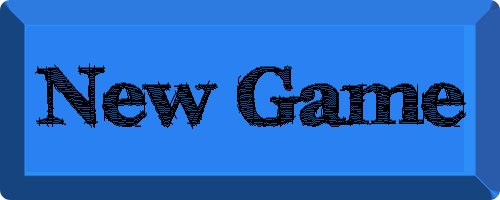
<style>
.page{position:relative;width:500px;height:200px;background:#2a81f1}
.page>*{position:absolute;margin:0}
.t1{font:80px "FFFTusj-Bold";color:#000000}
</style>
<div class="page">
<p class="t1" style="left:35px;top:64px;width:431px;height:65px">New Game</p>
<p class="t1" style="left:35px;top:63px;width:431px;height:65px;opacity:0.55">New Game</p>
</div>
